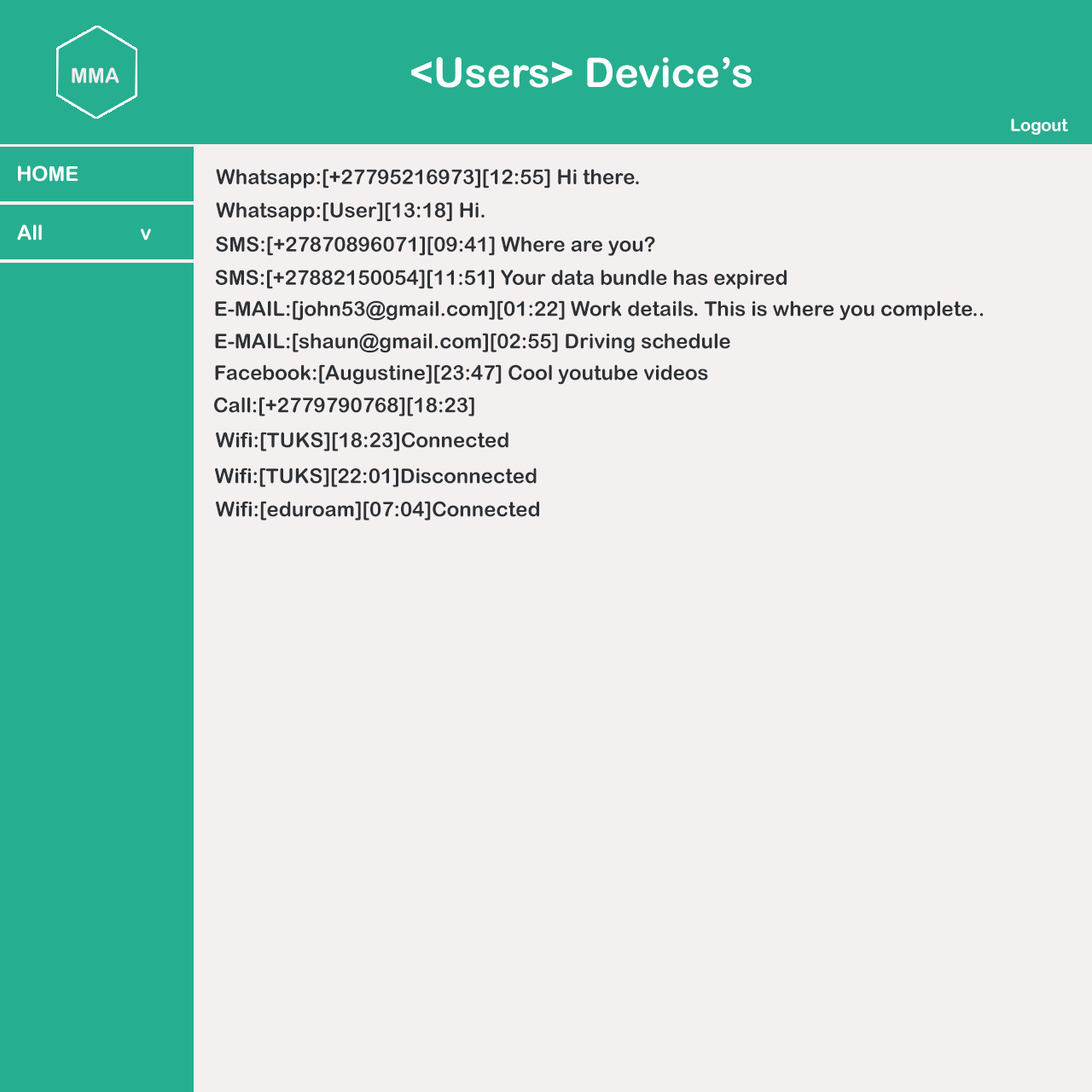
<style>
.page{position:relative;width:1092px;height:1092px;background:#f5f0f0}
.page>*{position:absolute;margin:0}
.t1{font:40.9px "ArialRoundedMTBold";color:#fcffff}
.t2{font:20.7px "ArialRoundedMTBold";color:#f2eded}
.t3{font:17.1px "ArialRoundedMTBold";color:#fefeff}
.t4{font:20.5px "ArialRoundedMTBold";color:#fcffff}
.t5{font:20.5px "ArialRoundedMTBold";color:#2e3237}
</style>
<div class="page">
<p class="t1" style="left:411px;top:57px;width:341px;height:31px">&lt;Users&gt; Device’s</p>
<p class="t2" style="left:72px;top:67px;width:47px;height:17px">MMA</p>
<p class="t3" style="left:1011px;top:119px;width:57px;height:16px">Logout</p>
<p class="t4" style="left:18px;top:166px;width:60px;height:16px">HOME</p>
<p class="t5" style="left:216px;top:169px;width:423px;height:20px">Whatsapp:[+27795216973][12:55] Hi there.</p>
<p class="t5" style="left:216px;top:202px;width:269px;height:20px">Whatsapp:[User][13:18] Hi.</p>
<p class="t4" style="left:17px;top:224px;width:134px;height:17px">All                   v</p>
<p class="t5" style="left:216px;top:236px;width:439px;height:20px">SMS:[+27870896071][09:41] Where are you?</p>
<p class="t5" style="left:216px;top:270px;width:571px;height:19px">SMS:[+27882150054][11:51] Your data bundle has expired</p>
<p class="t5" style="left:215px;top:300px;width:769px;height:21px">E-MAIL:[john53@gmail.com][01:22] Work details. This is where you complete..</p>
<p class="t5" style="left:215px;top:333px;width:515px;height:20px">E-MAIL:[shaun@gmail.com][02:55] Driving schedule</p>
<p class="t5" style="left:215px;top:364px;width:493px;height:21px">Facebook:[Augustine][23:47] Cool youtube videos</p>
<p class="t5" style="left:214px;top:397px;width:260px;height:19px">Call:[+2779790768][18:23]</p>
<p class="t5" style="left:216px;top:432px;width:292px;height:19px">Wifi:[TUKS][18:23]Connected</p>
<p class="t5" style="left:215px;top:468px;width:322px;height:19px">Wifi:[TUKS][22:01]Disconnected</p>
<p class="t5" style="left:216px;top:501px;width:323px;height:19px">Wifi:[eduroam][07:04]Connected</p>
</div>
